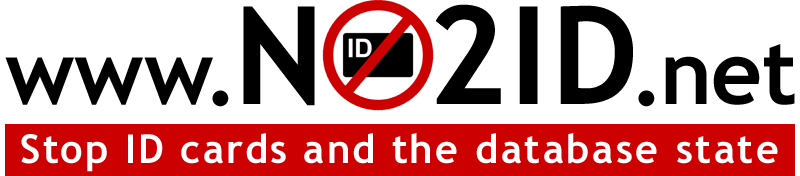
<style>
.page{position:relative;width:800px;height:176px;background:#ffffff}
.page>*{position:absolute;margin:0}
.t1{font:89px "TrebuchetMS-Bold";color:#000000}
.t2{font:89px "TrebuchetMS-Bold";letter-spacing:0.005em;color:#000000}
.t3{font:89px "TrebuchetMS-Bold";letter-spacing:-0.05em;color:#000000}
.t4{font:136px "TrebuchetMS-Bold";letter-spacing:0.05em;color:#000000}
.t5{font:136px "TrebuchetMS-Bold";letter-spacing:0.025em;color:#000000}
.t6{font:136px "TrebuchetMS-Bold";letter-spacing:-0.05em;color:#000000}
.t7{font:89px "TrebuchetMS-Bold";letter-spacing:-0.01em;color:#000000}
.t8{font:40px "TrebuchetMS-Bold";letter-spacing:0.05em;color:#ffffff}
.t9{font:40px "TrebuchetMS-Bold";letter-spacing:0.06em;color:#ffffff}
</style>
<div class="page">
<p class="t1" style="left:5px;top:4px;width:790px;height:103px">ww<span class="t2">w</span><span class="t3">.</span><span class="t4">N  </span><span class="t5">2I</span><span class="t6">D</span><span class="t3">.</span><span class="t7">n</span>et</p>
<p class="t8" style="left:21px;top:133px;width:757px;height:39px">Stop ID cards and the <span class="t9">database state</span></p>
</div>
